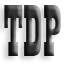
<style>
.page{position:relative;width:64px;height:64px}
.page>*{position:absolute;margin:0}
.t1{font:76px "Playbill";scale:0.79 1}
</style>
<div class="page">
<p class="t1" style="left:4px;top:5px;width:57px;height:51px">TDP</p>
</div>
